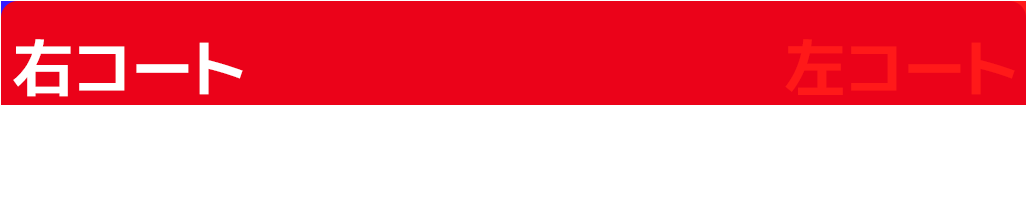
<style>
.page{position:relative;width:1027px;height:210px;background:#ffffff}
.page>*{position:absolute;margin:0}
.t1{font:62.6px "Kazesawa-Bold";color:#ffffff}
.t2{font:62.6px "Kazesawa-Bold";color:#ff1919}
</style>
<div class="page">
<p class="t1" style="left:13px;top:39px;width:230px;height:58px">右コート</p>
<p class="t2" style="left:785px;top:39px;width:230px;height:56px">左コート</p>
</div>
